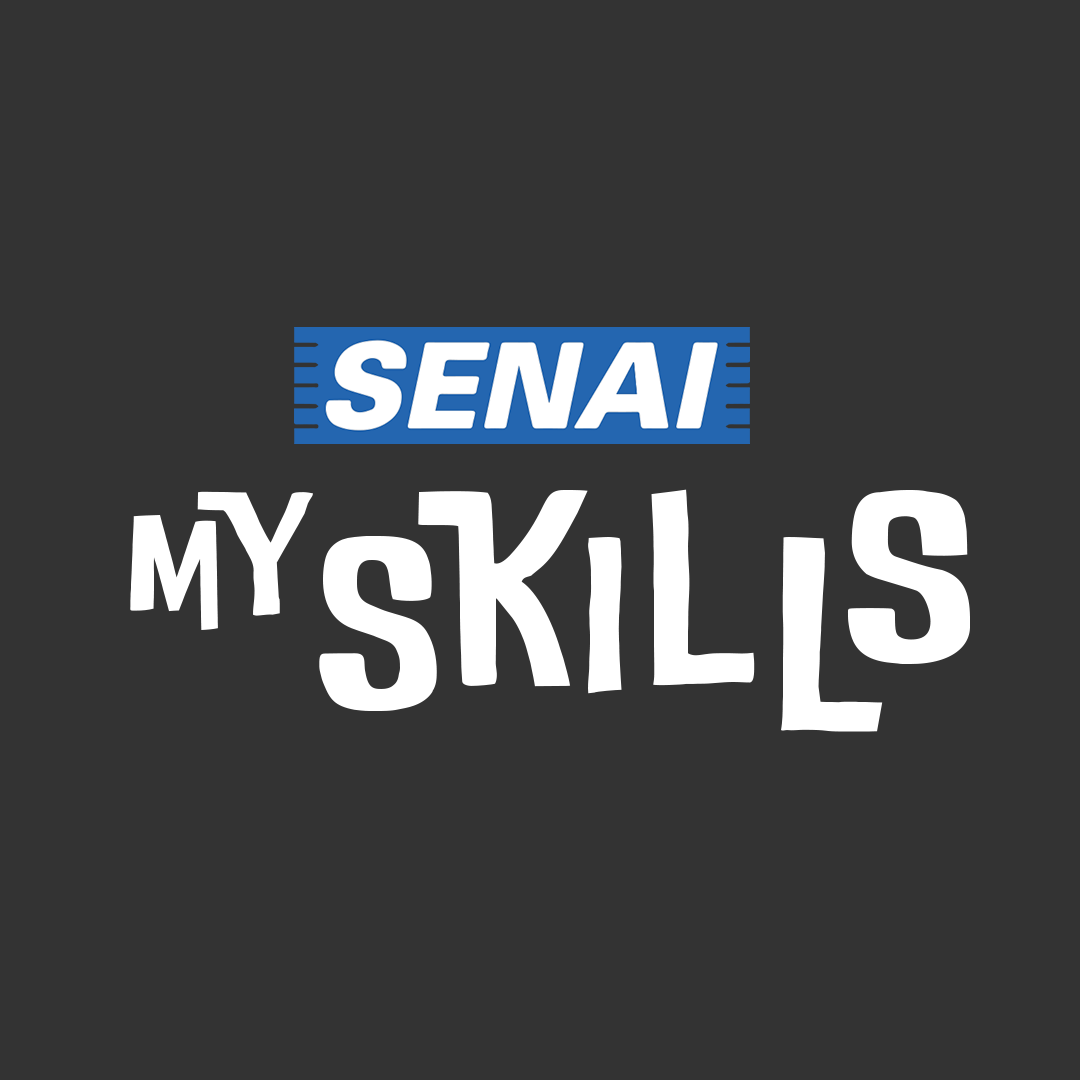
<style>
.page{position:relative;width:1080px;height:1080px;background:#333333}
.page>*{position:absolute;margin:0}
.t1{font:154px "DoUbLeBaSs-Regular";letter-spacing:0.05em;color:#ffffff}
.t2{font:246.8px "DoUbLeBaSs-Regular";letter-spacing:0.05em;color:#ffffff}
</style>
<div class="page">
<p class="t1" style="left:130px;top:491px;width:183px;height:139px">My</p>
<p class="t2" style="left:319px;top:489px;width:651px;height:243px">SKILLS</p>
</div>
